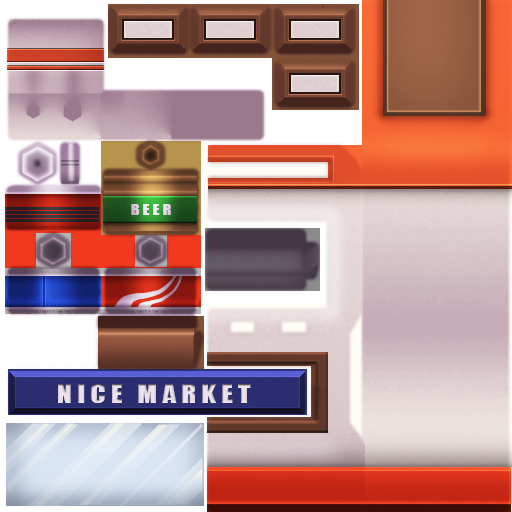
<style>
.page{position:relative;width:512px;height:512px}
.page>*{position:absolute;margin:0}
.t1{font:14.4px "Impact";letter-spacing:0.2em;color:#e6dbe6;scale:1.12 1}
.t2{font:24px "Impact";letter-spacing:0.2em;color:#e9e0e9;scale:1.12 1}
</style>
<div class="page">
<p class="t1" style="left:131px;top:204px;width:40px;height:11px">BEER</p>
<p class="t2" style="left:58px;top:384px;width:193px;height:19px">NICE MARKET</p>
</div>
